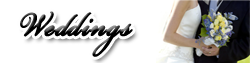
<style>
.page{position:relative;width:250px;height:63px;background:#ffffff}
.page>*{position:absolute;margin:0}
.t1{font:51.5px "BickhamScriptPro-Regular";letter-spacing:0.01em;font-weight:bold;scale:0.83 1}
</style>
<div class="page">
<p class="t1" style="left:20px;top:11px;width:113px;height:46px">Weddings</p>
</div>
